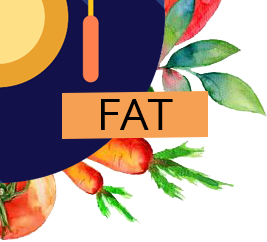
<style>
.page{position:relative;width:267px;height:242px;background:#ffffff}
.page>*{position:absolute;margin:0}
.t1{font:48px "Corbel";color:#000000}
</style>
<div class="page">
<p class="t1" style="left:101px;top:99px;width:72px;height:31px">FAT</p>
</div>
